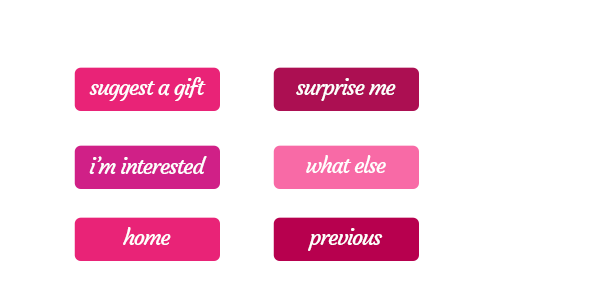
<style>
.page{position:relative;width:600px;height:300px;background:#ffffff}
.page>*{position:absolute;margin:0}
.t1{font:22px "Courgette-Regular";letter-spacing:-0.06em;color:#fefefe}
</style>
<div class="page">
<p class="t1" style="left:89px;top:77px;width:117px;height:24px">suggest a gift</p>
<p class="t1" style="left:296px;top:78px;width:100px;height:23px">surprise me</p>
<p class="t1" style="left:89px;top:156px;width:118px;height:18px">i’m interested</p>
<p class="t1" style="left:306px;top:155px;width:80px;height:19px">what else</p>
<p class="t1" style="left:123px;top:227px;width:48px;height:18px">home</p>
<p class="t1" style="left:308px;top:228px;width:75px;height:23px">previous</p>
</div>
